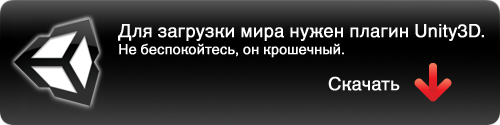
<style>
.page{position:relative;width:500px;height:125px}
.page>*{position:absolute;margin:0}
.t1{font:18px "HelveticaWorld-Regular";color:#ffffff;font-weight:bold}
.t2{font:14px "HelveticaWorld-Regular";color:#ffffff;font-weight:bold}
</style>
<div class="page">
<p class="t1" style="left:118px;top:24px;width:366px;height:34px">Для загрузки мира нужен плагин Unity3D.<br><span class="t2">Не беспокойтесь, он крошечный.</span></p>
<p class="t1" style="left:328px;top:76px;width:72px;height:15px">Скачать</p>
</div>
